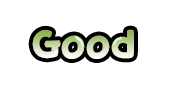
<style>
.page{position:relative;width:178px;height:100px;background:#ffffff}
.page>*{position:absolute;margin:0}
.t1{font:35px "KoreanPODG-R";letter-spacing:0.025em}
</style>
<div class="page">
<p class="t1" style="left:32px;top:29px;width:102px;height:30px">Good</p>
</div>
